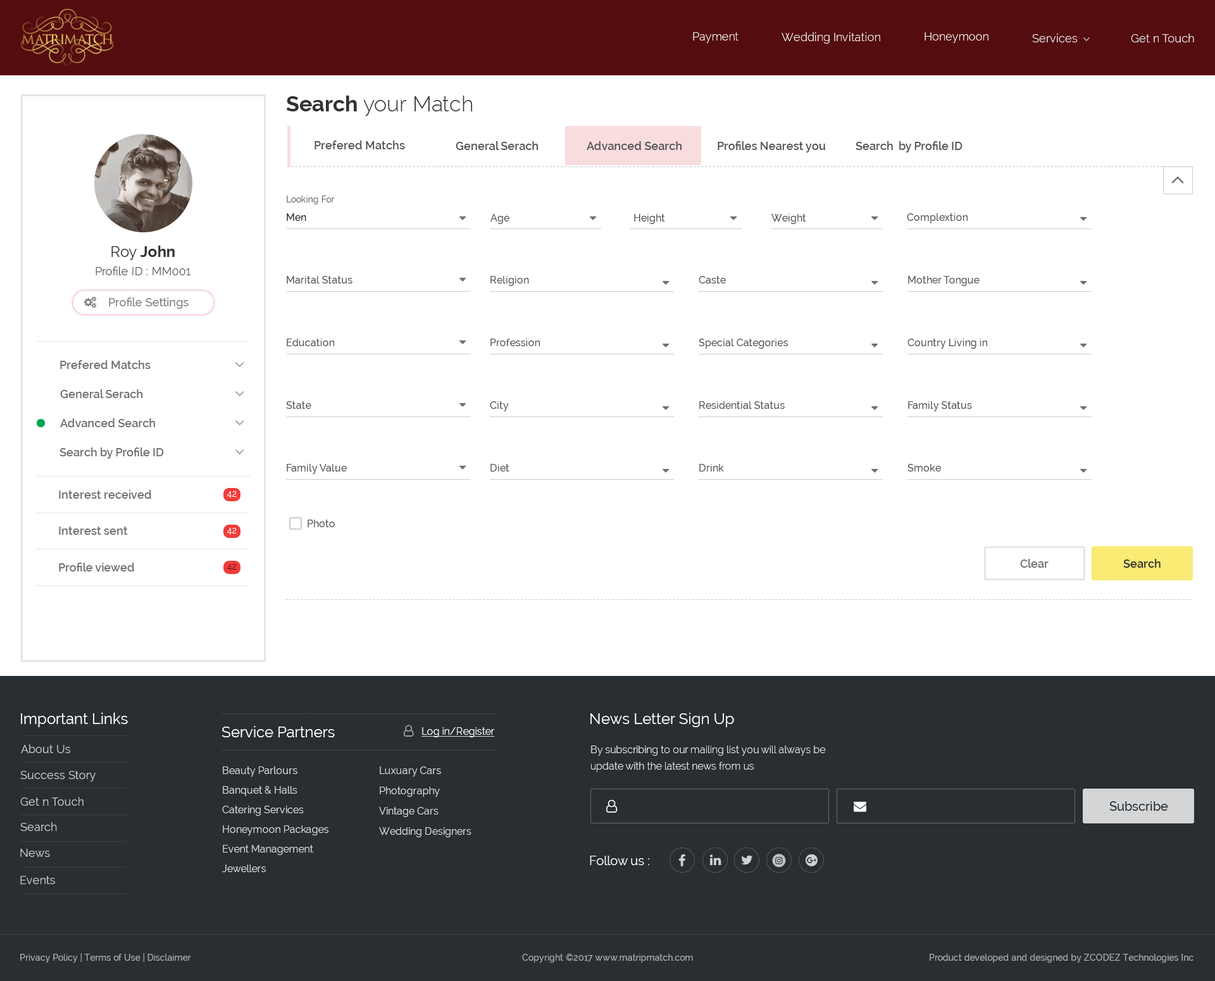
<style>
.page{position:relative;width:1215px;height:981px;background:#ffffff}
.page>*{position:absolute;margin:0}
.t1{font:11.4px "Raleway-Light";color:#ffffff}
.t2{font:21.5px "Raleway-Light";color:#333333}
.t3{font:21.5px "Raleway-Bold";color:#333333}
.t4{font:11.4px "Raleway-SemiBold";color:#555555}
.t5{font:8.9px "Raleway-Medium";color:#707070}
.t6{font:10.1px "Raleway-Medium";color:#202020}
.t7{font:10.1px "Raleway-Medium";color:#555555}
.t8{font:15.2px "Raleway-Bold";color:#333333}
.t9{font:15.2px "Raleway";color:#333333}
.t10{font:11.4px "Raleway";color:#555555}
.t11{font:11.4px "Raleway-Medium";color:#808080}
.t12{font:11.4px "Raleway-SemiBold";color:#707070}
.t13{font:8.9px "Raleway";color:#ffffff}
.t14{font:8.9px "Raleway";color:#671216}
.t15{font:11.4px "Raleway-SemiBold";color:#333333}
.t16{font:15.2px "Raleway";color:#ffffff}
.t17{font:10.1px "Raleway";color:#ffffff;text-decoration:underline}
.t18{font:11.4px "Raleway";color:#c6c7c8}
.t19{font:10.1px/16.5px "Raleway-Light";color:#ffffff}
.t20{font:10.1px/19.6px "Raleway";color:#e0e0e0}
.t21{font:10.1px/20.3px "Raleway";color:#e0e0e0}
.t22{font:12.7px "Raleway-Medium";color:#282e32}
.t23{font:12.7px "Raleway";color:#ffffff}
.t24{font:8.9px "Raleway-Medium";color:#abacad}
</style>
<div class="page">
<p class="t1" style="left:693px;top:32px;width:46px;height:11px">Payment</p>
<p class="t1" style="left:782px;top:32px;width:98px;height:12px">Wedding Invitation</p>
<p class="t1" style="left:925px;top:32px;width:64px;height:11px">Honeymoon</p>
<p class="t1" style="left:1032px;top:34px;width:45px;height:8px">Services</p>
<p class="t1" style="left:1131px;top:34px;width:63px;height:8px">Get n Touch</p>
<p class="t2" style="left:287px;top:96px;width:185px;height:20px"><span class="t3">Search </span>your Match</p>
<p class="t4" style="left:315px;top:141px;width:90px;height:8px">Prefered Matchs</p>
<p class="t4" style="left:456px;top:141px;width:82px;height:9px">General Serach</p>
<p class="t4" style="left:587px;top:141px;width:95px;height:9px">Advanced Search</p>
<p class="t4" style="left:718px;top:141px;width:108px;height:12px">Profiles Nearest you</p>
<p class="t4" style="left:856px;top:141px;width:107px;height:12px">Search  by Profile ID</p>
<p class="t5" style="left:287px;top:196px;width:48px;height:8px">Looking For</p>
<p class="t6" style="left:287px;top:213px;width:19px;height:8px">Men</p>
<p class="t7" style="left:491px;top:214px;width:19px;height:10px">Age</p>
<p class="t7" style="left:634px;top:214px;width:31px;height:10px">Height</p>
<p class="t7" style="left:772px;top:214px;width:34px;height:10px">Weight</p>
<p class="t7" style="left:907px;top:213px;width:61px;height:10px">Complextion</p>
<p class="t8" style="left:111px;top:246px;width:64px;height:14px"><span class="t9">Roy </span>John</p>
<p class="t10" style="left:96px;top:266px;width:95px;height:9px">Profile ID : MM001</p>
<p class="t7" style="left:287px;top:276px;width:66px;height:8px">Marital Status</p>
<p class="t7" style="left:491px;top:276px;width:38px;height:10px">Religion</p>
<p class="t7" style="left:699px;top:276px;width:27px;height:8px">Caste</p>
<p class="t7" style="left:908px;top:276px;width:72px;height:10px">Mother Tongue</p>
<p class="t11" style="left:109px;top:298px;width:80px;height:11px">Profile Settings</p>
<p class="t7" style="left:287px;top:339px;width:47px;height:7px">Education</p>
<p class="t7" style="left:491px;top:339px;width:49px;height:7px">Profession</p>
<p class="t7" style="left:699px;top:339px;width:89px;height:10px">Special Categories</p>
<p class="t7" style="left:908px;top:339px;width:79px;height:10px">Country Living in</p>
<p class="t12" style="left:60px;top:360px;width:91px;height:9px">Prefered Matchs</p>
<p class="t12" style="left:60px;top:389px;width:82px;height:9px">General Serach</p>
<p class="t7" style="left:286px;top:401px;width:25px;height:8px">State</p>
<p class="t7" style="left:490px;top:401px;width:19px;height:10px">City</p>
<p class="t7" style="left:699px;top:401px;width:86px;height:8px">Residential Status</p>
<p class="t7" style="left:908px;top:401px;width:64px;height:10px">Family Status</p>
<p class="t12" style="left:60px;top:418px;width:95px;height:9px">Advanced Search</p>
<p class="t12" style="left:60px;top:448px;width:104px;height:11px">Search by Profile ID</p>
<p class="t7" style="left:287px;top:464px;width:60px;height:10px">Family Value</p>
<p class="t7" style="left:491px;top:464px;width:19px;height:8px">Diet</p>
<p class="t7" style="left:699px;top:464px;width:25px;height:8px">Drink</p>
<p class="t7" style="left:908px;top:464px;width:33px;height:8px">Smoke</p>
<p class="t12" style="left:59px;top:490px;width:92px;height:9px">Interest received</p>
<p class="t13" style="left:227px;top:491px;width:10px;height:7px">42</p>
<p class="t7" style="left:308px;top:520px;width:27px;height:7px">Photo</p>
<p class="t12" style="left:59px;top:527px;width:69px;height:8px">Interest sent</p>
<p class="t13" style="left:227px;top:528px;width:10px;height:7px">42</p>
<p class="t12" style="left:59px;top:563px;width:75px;height:9px">Profile viewed</p>
<p class="t14" style="left:227px;top:564px;width:10px;height:7px">42</p>
<p class="t12" style="left:1020px;top:559px;width:29px;height:9px">Clear</p>
<p class="t15" style="left:1124px;top:559px;width:37px;height:9px">Search</p>
<p class="t16" style="left:21px;top:713px;width:107px;height:14px">Important Links</p>
<p class="t16" style="left:591px;top:713px;width:143px;height:14px">News Letter Sign Up</p>
<p class="t16" style="left:222px;top:726px;width:113px;height:11px">Service Partners</p>
<p class="t17" style="left:422px;top:727px;width:73px;height:10px">Log in/Register</p>
<p class="t18" style="left:21px;top:744px;width:49px;height:9px">About Us</p>
<p class="t19" style="left:591px;top:746px;width:235px;height:26px">By subscribing to our mailing list you will always be <br>update with the latest news from us</p>
<p class="t18" style="left:20px;top:771px;width:76px;height:11px">Success Story</p>
<p class="t20" style="left:222px;top:767px;width:107px;height:105px">Beauty Parlours<br>Banquet &amp; Halls<br>Catering Services<br>Honeymoon Packages<br>Event Management<br>Jewellers</p>
<p class="t21" style="left:379px;top:767px;width:93px;height:70px">Luxuary Cars<br>Photography<br>Vintage Cars<br>Wedding Designers</p>
<p class="t18" style="left:20px;top:797px;width:64px;height:9px">Get n Touch</p>
<p class="t22" style="left:1110px;top:801px;width:59px;height:10px">Subscribe</p>
<p class="t18" style="left:20px;top:822px;width:37px;height:9px">Search</p>
<p class="t18" style="left:20px;top:849px;width:30px;height:8px">News</p>
<p class="t23" style="left:590px;top:856px;width:59px;height:9px">Follow us :</p>
<p class="t18" style="left:20px;top:876px;width:35px;height:8px">Events</p>
<p class="t24" style="left:20px;top:953px;width:171px;height:10px">Privacy Policy | Terms of Use | Disclaimer</p>
<p class="t24" style="left:522px;top:954px;width:171px;height:9px">Copyright ©2017 www.matripmatch.com</p>
<p class="t24" style="left:930px;top:954px;width:264px;height:9px">Product developed and designed by ZCODEZ Technologies Inc</p>
</div>
